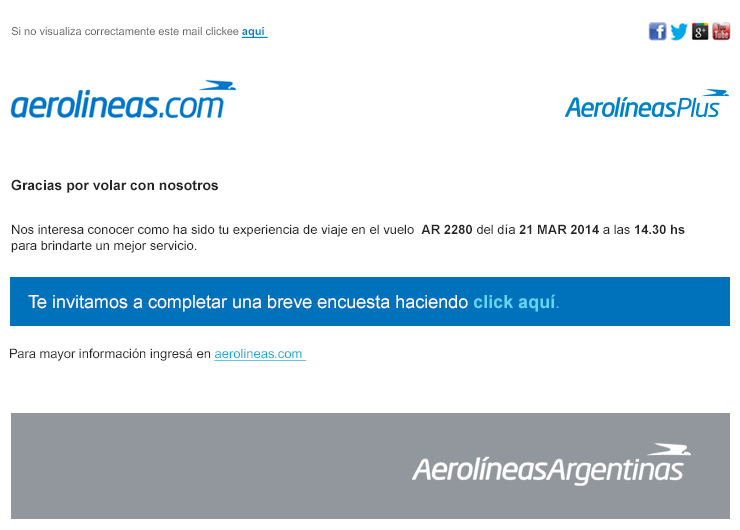
<style>
.page{position:relative;width:740px;height:530px;background:#ffffff}
.page>*{position:absolute;margin:0}
.t1{font:11px "ArialMT";color:#5e6061}
.t2{font:11px "Arial-BoldMT";color:#0082c8;text-decoration:underline}
.t3{font:13px "ArialMT";color:#252525}
.t4{font:14px "Arial-BoldMT";color:#252525}
.t5{font:13px "Arial-BoldMT";color:#252525}
.t6{font:18px "ArialMT";color:#ffffff}
.t7{font:18px "Arial-BoldMT";color:#64d4f0}
.t8{font:18px "ArialMT";color:#64d4f0}
.t9{font:13px "ArialMT";color:#08abd4}
.t10{font:13px "ArialMT";color:#08abd4;text-decoration:underline}
</style>
<div class="page">
<p class="t1" style="left:11px;top:27px;width:257px;height:11px">Si no visualiza correctamente este mail clickee <span class="t2">aquí</span></p>
<p class="t3" style="left:11px;top:179px;width:674px;height:74px"><span class="t4">Gracias por volar con nosotros<br><br><br></span>Nos interesa conocer como ha sido tu experiencia de viaje en el vuelo  <span class="t5">AR 2280 </span>del día <span class="t5">21 MAR 2014</span> a las <span class="t5">14.30 hs<br></span>para brindarte un mejor servicio.</p>
<p class="t6" style="left:28px;top:294px;width:531px;height:18px">Te invitamos a completar una breve encuesta haciendo <span class="t7">click aquí</span><span class="t8">.</span></p>
<p class="t3" style="left:10px;top:348px;width:296px;height:13px"><span class="t9"><br></span><br>Para mayor información ingresá en <span class="t10">aerolineas.com</span></p>
</div>
